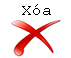
<style>
.page{position:relative;width:71px;height:58px;background:#ffffff}
.page>*{position:absolute;margin:0}
.t1{font:12px "CourierNewPSMT";color:#000000}
</style>
<div class="page">
<p class="t1" style="left:22px;top:4px;width:29px;height:11px">Xóa</p>
</div>
